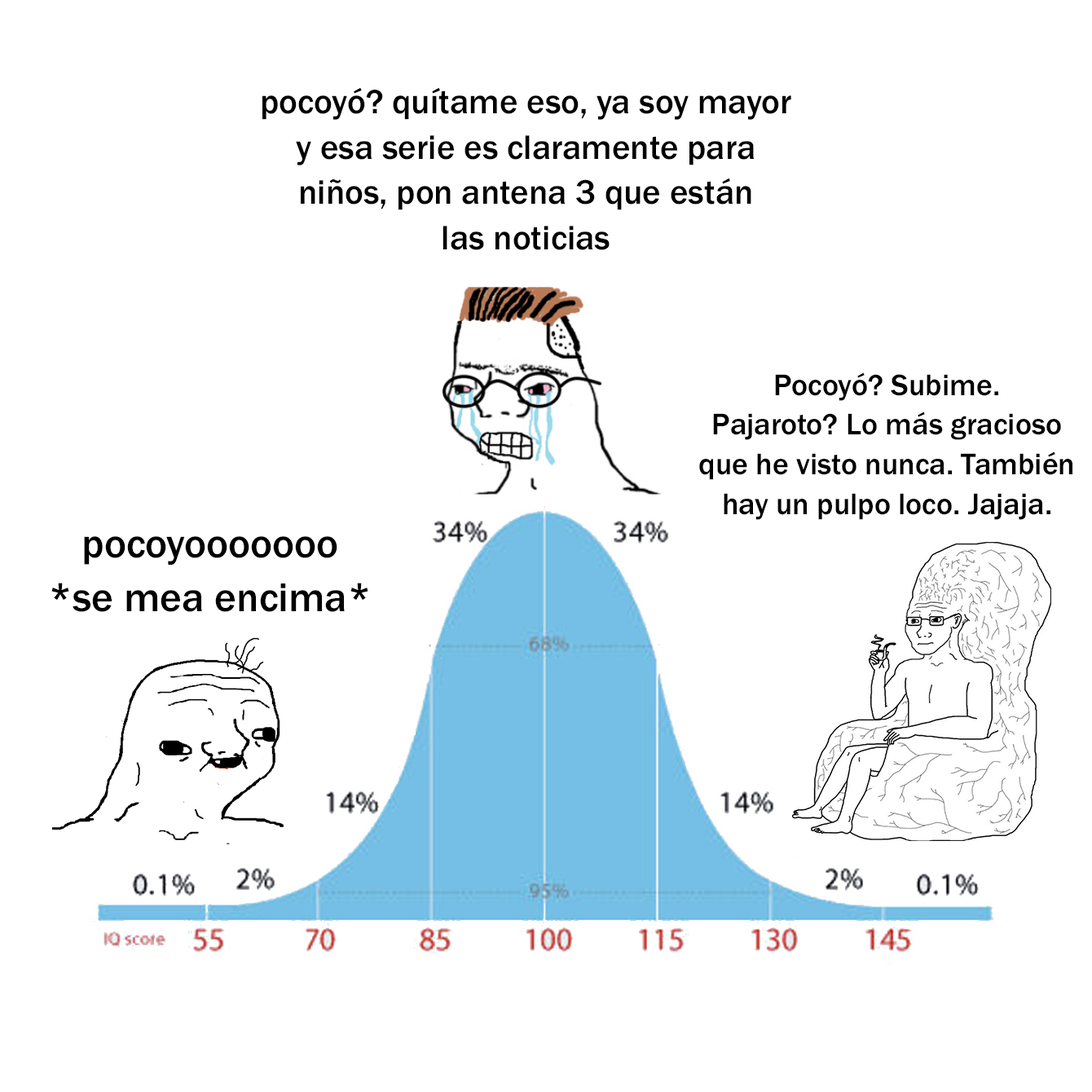
<style>
.page{position:relative;width:1092px;height:1092px;background:#ffffff}
.page>*{position:absolute;margin:0}
.t1{font:35.1px "FranklinGothic-Medium";color:#000000}
.t2{font:30.8px "FranklinGothic-Medium";color:#000000}
.t3{font:41.6px "FranklinGothic-Medium";color:#000000}
</style>
<div class="page">
<p class="t1" style="left:262px;top:87px;width:529px;height:163px;text-align:center">pocoyó? quítame eso, ya soy mayor<br>y esa serie es claramente para<br>niños, pon antena 3 que están<br>las noticias</p>
<p class="t2" style="left:699px;top:372px;width:373px;height:148px;text-align:center">Pocoyó? Subime.<br>Pajaroto? Lo más gracioso<br>que he visto nunca. También<br>hay un pulpo loco. Jajaja.</p>
<p class="t3" style="left:51px;top:536px;width:317px;height:76px;text-align:center">pocoyooooooo<br>*se mea encima*</p>
</div>
